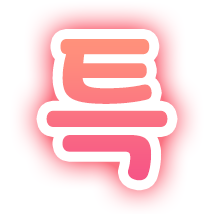
<style>
.page{position:relative;width:214px;height:214px;background:#ffffff}
.page>*{position:absolute;margin:0}
.t1{font:146.7px "Binggrae-Bold";text-transform:uppercase;scale:0.91 1}
</style>
<div class="page">
<p class="t1" style="left:46px;top:39px;width:122px;height:142px">특</p>
</div>
